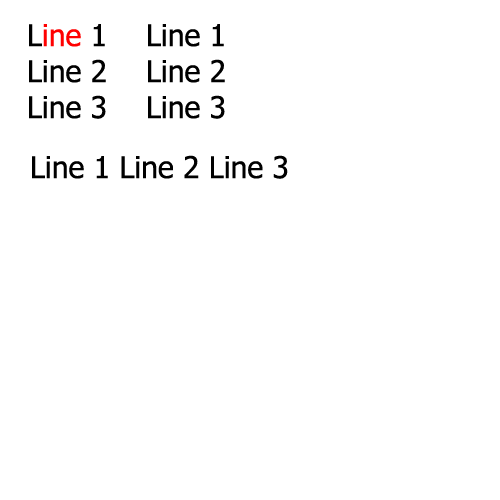
<style>
.page{position:relative;width:500px;height:500px;background:#ffffff}
.page>*{position:absolute;margin:0}
.t1{font:30px "Tahoma";color:#000000}
.t2{font:30px "Tahoma";color:#ff0000}
</style>
<div class="page">
<p class="t1" style="left:29px;top:24px;width:77px;height:95px">L<span class="t2">ine </span>1<br>Line 2<br>Line 3</p>
<p class="t1" style="left:148px;top:24px;width:77px;height:95px">Line 1<br>Line 2<br>Line 3</p>
<p class="t1" style="left:32px;top:155px;width:256px;height:24px">Line 1 Line 2 Line 3</p>
</div>
